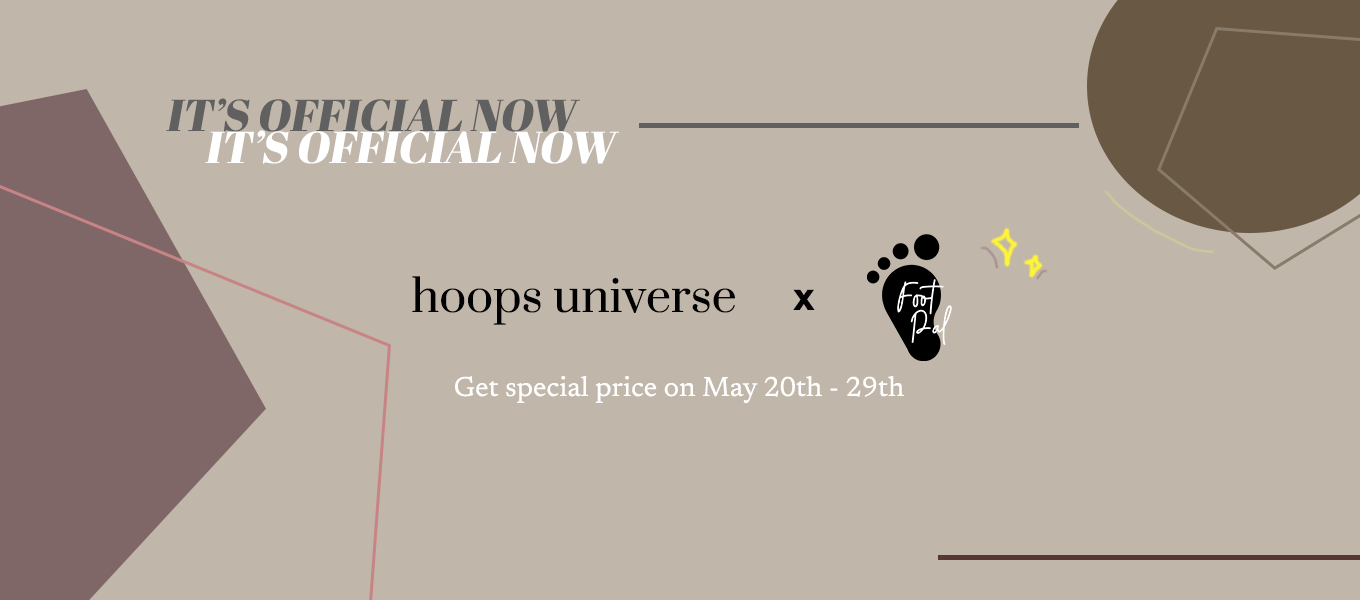
<style>
.page{position:relative;width:1360px;height:600px;background:#c0b6aa}
.page>*{position:absolute;margin:0}
.t1{font:44.4px "AbrilFatface-Regular";color:#606060;font-style:italic}
.t2{font:44.4px "AbrilFatface-Regular";color:#ffffff;font-style:italic}
.t3{font:44.4px "Prata-Regular";color:#010101}
.t4{font:38.9px "Arial-BoldMT";color:#010101}
.t5{font:27.8px "Newsreader-Regular";color:#ffffff}
</style>
<div class="page">
<p class="t1" style="left:166px;top:98px;width:414px;height:34px">IT’S OFFICIAL NOW</p>
<p class="t2" style="left:205px;top:130px;width:414px;height:34px">IT’S OFFICIAL NOW</p>
<p class="t3" style="left:412px;top:276px;width:323px;height:49px">hoops universe</p>
<p class="t4" style="left:793px;top:289px;width:22px;height:21px">x</p>
<p class="t5" style="left:455px;top:375px;width:449px;height:29px">Get special price on May 20th - 29th</p>
</div>
